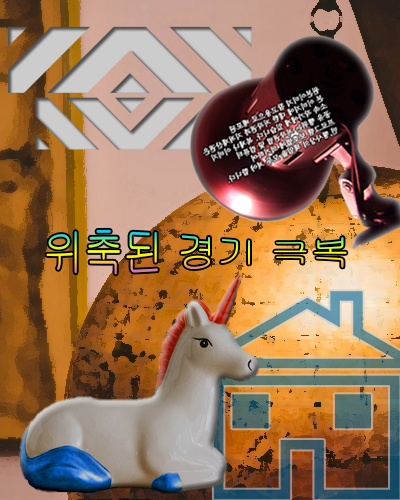
<style>
.page{position:relative;width:400px;height:500px}
.page>*{position:absolute;margin:0}
.t1{font:40px "Gulim"}
</style>
<div class="page">
<p class="t1" style="left:46px;top:229px;width:301px;height:46px">위축된 경기 극복</p>
</div>
